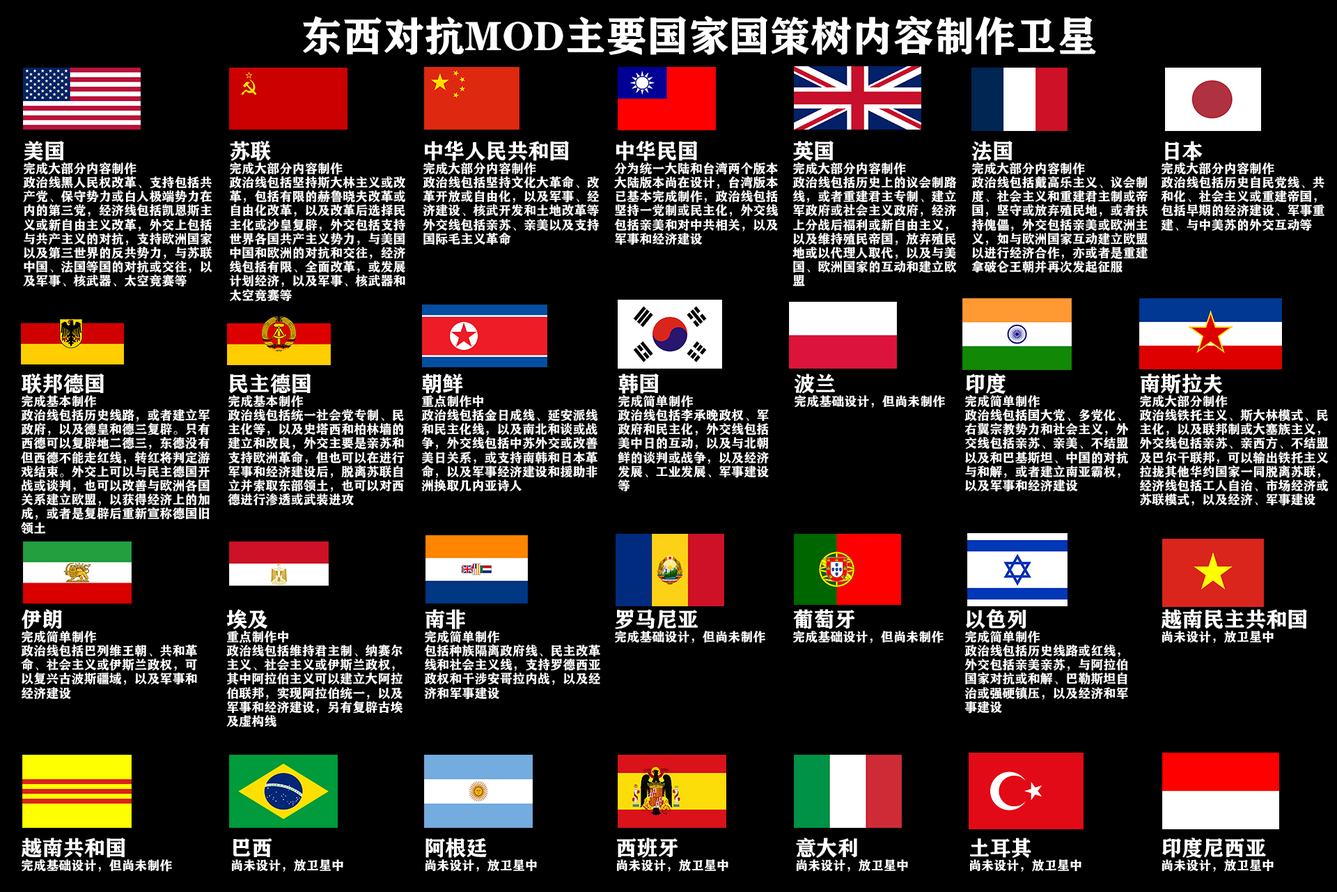
<style>
.page{position:relative;width:1337px;height:892px;background:#000000}
.page>*{position:absolute;margin:0}
.t1{font:40.7px "FZCHSJW--GB1-0";color:#ffffff}
.t2{font:12.5px/14.1px "FZCHSJW--GB1-0";color:#ffffff}
.t3{font:20.9px/21.7px "FZCHSJW--GB1-0";color:#ffffff}
.t4{font:12.5px/21.7px "FZCHSJW--GB1-0";color:#ffffff}
</style>
<div class="page">
<p class="t1" style="left:303px;top:15px;width:793px;height:40px">东西对抗MOD主要国家国策树内容制作卫星</p>
<p class="t2" style="left:23px;top:141px;width:189px;height:146px"><span class="t3">美国<br></span>完成大部分内容制作<br>政治线黑人民权改革、支持包括共<br>产党、保守势力或白人极端势力在<br>内的第三党，经济线包括凯恩斯主<br>义或新自由主义改革，外交上包括<br>与共产主义的对抗，支持欧洲国家<br>以及第三世界的反共势力，与苏联<br>中国、法国等国的对抗或交往，以<br>及军事、核武器、太空竞赛等</p>
<p class="t2" style="left:229px;top:141px;width:176px;height:161px"><span class="t3">苏联<br></span>完成大部分内容制作<br>政治线包括坚持斯大林主义或改<br>革，包括有限的赫鲁晓夫改革或<br>自由化改革，以及改革后选择民<br>主化或沙皇复辟，外交包括支持<br>世界各国共产主义势力，与美国<br>中国和欧洲的对抗和交往，经济<br>线包括有限、全面改革，或发展<br>计划经济，以及军事、核武器和<br>太空竞赛等</p>
<p class="t2" style="left:423px;top:141px;width:176px;height:104px"><span class="t3">中华人民共和国<br></span>完成大部分内容制作<br>政治线包括坚持文化大革命、改<br>革开放或自由化，以及军事、经<br>济建设、核武开发和土地改革等<br>外交线包括亲苏、亲美以及支持<br>国际毛主义革命</p>
<p class="t2" style="left:614px;top:141px;width:165px;height:104px"><span class="t3">中华民国<br></span>分为统一大陆和台湾两个版本<br>大陆版本尚在设计，台湾版本<br>已基本完成制作，政治线包括<br>坚持一党制或民主化，外交线<br>包括亲美和对中共相关，以及<br>军事和经济建设</p>
<p class="t2" style="left:793px;top:141px;width:164px;height:145px"><span class="t3">英国<br></span>完成大部分内容制作<br>政治线包括历史上的议会制路<br>线，或者重建君主专制、建立<br>军政府或社会主义政府，经济<br>上分战后福利或新自由主义，<br>以及维持殖民帝国，放弃殖民<br>地或以代理人取代，以及与美<br>国、欧洲国家的互动和建立欧<br>盟</p>
<p class="t2" style="left:972px;top:141px;width:177px;height:132px"><span class="t3">法国<br></span>完成大部分内容制作<br>政治线包括戴高乐主义、议会制<br>度、社会主义和重建君主制或帝<br>国，坚守或放弃殖民地，或者扶<br>持傀儡，外交包括亲美或欧洲主<br>义，如与欧洲国家互动建立欧盟<br>以进行经济合作，亦或者是重建<br>拿破仑王朝并再次发起征服</p>
<p class="t2" style="left:1161px;top:141px;width:164px;height:90px"><span class="t3">日本<br></span>完成大部分内容制作<br>政治线包括历史自民党线、共<br>和化、社会主义或重建帝国，<br>包括早期的经济建设、军事重<br>建、与中美苏的外交互动等</p>
<p class="t2" style="left:21px;top:373px;width:189px;height:161px"><span class="t3">联邦德国<br></span>完成基本制作<br>政治线包括历史线路，或者建立军<br>政府，以及德皇和德三复辟。只有<br>西德可以复辟地二德三，东德没有<br>但西德不能走红线，转红将判定游<br>戏结束。外交上可以与民主德国开<br>战或谈判，也可以改善与欧洲各国<br>关系建立欧盟，以获得经济上的加<br>成，或者是复辟后重新宣称德国旧<br>领土</p>
<p class="t2" style="left:228px;top:373px;width:177px;height:133px"><span class="t3">民主德国<br></span>完成基本制作<br>政治线包括统一社会党专制、民<br>主化等，以及史塔西和柏林墙的<br>建立和改良，外交主要是亲苏和<br>支持欧洲革命，但也可以在进行<br>军事和经济建设后，脱离苏联自<br>立并索取东部领土，也可以对西<br>德进行渗透或武装进攻</p>
<p class="t2" style="left:421px;top:373px;width:177px;height:119px"><span class="t3">朝鲜<br></span>重点制作中<br>政治线包括金日成线、延安派线<br>和民主化线，以及南北和谈或战<br>争，外交线包括中苏外交或改善<br>美日关系，或支持南韩和日本革<br>命，以及军事经济建设和援助非<br>洲换取几内亚诗人</p>
<p class="t2" style="left:618px;top:373px;width:151px;height:119px"><span class="t3">韩国<br></span>完成简单制作<br>政治线包括李承晚政权、军<br>政府和民主化，外交线包括<br>美中日的互动，以及与北朝<br>鲜的谈判或战争，以及经济<br>发展、工业发展、军事建设<br>等</p>
<p class="t4" style="left:795px;top:373px;width:150px;height:34px"><span class="t3">波兰<br></span>完成基础设计，但尚未制作</p>
<p class="t2" style="left:965px;top:373px;width:163px;height:119px"><span class="t3">印度<br></span>完成简单制作<br>政治线包括国大党、多党化、<br>右翼宗教势力和社会主义，外<br>交线包括亲苏、亲美、不结盟<br>以及和巴基斯坦、中国的对抗<br>与和解，或者建立南亚霸权，<br>以及军事和经济建设</p>
<p class="t2" style="left:1140px;top:373px;width:189px;height:133px"><span class="t3">南斯拉夫<br></span>完成大部分制作<br>政治线铁托主义、斯大林模式、民<br>主化，以及联邦制或大塞族主义，<br>外交线包括亲苏、亲西方、不结盟<br>及巴尔干联邦，可以输出铁托主义<br>拉拢其他华约国家一同脱离苏联，<br>经济线包括工人自治、市场经济或<br>苏联模式，以及经济、军事建设</p>
<p class="t2" style="left:21px;top:609px;width:176px;height:90px"><span class="t3">伊朗<br></span>完成简单制作<br>政治线包括巴列维王朝、共和革<br>命、社会主义或伊斯兰政权，可<br>以复兴古波斯疆域，以及军事和<br>经济建设</p>
<p class="t2" style="left:226px;top:609px;width:177px;height:118px"><span class="t3">埃及<br></span>重点制作中<br>政治线包括维持君主制、纳赛尔<br>主义、社会主义或伊斯兰政权，<br>其中阿拉伯主义可以建立大阿拉<br>伯联邦，实现阿拉伯统一，以及<br>军事和经济建设，另有复辟古埃<br>及虚构线</p>
<p class="t2" style="left:424px;top:609px;width:177px;height:90px"><span class="t3">南非<br></span>完成简单制作<br>包括种族隔离政府线、民主改革<br>线和社会主义线，支持罗德西亚<br>政权和干涉安哥拉内战，以及经<br>济和军事建设</p>
<p class="t4" style="left:615px;top:609px;width:151px;height:34px"><span class="t3">罗马尼亚<br></span>完成基础设计，但尚未制作</p>
<p class="t4" style="left:793px;top:609px;width:151px;height:34px"><span class="t3">葡萄牙<br></span>完成基础设计，但尚未制作</p>
<p class="t2" style="left:965px;top:608px;width:163px;height:105px"><span class="t3">以色列<br></span>完成简单制作<br>政治线包括历史线路或红线，<br>外交包括亲美亲苏，与阿拉伯<br>国家对抗或和解、巴勒斯坦自<br>治或强硬镇压，以及经济和军<br>事建设</p>
<p class="t4" style="left:1162px;top:609px;width:145px;height:34px"><span class="t3">越南民主共和国<br></span>尚未设计，放卫星中</p>
<p class="t4" style="left:22px;top:837px;width:150px;height:34px"><span class="t3">越南共和国<br></span>完成基础设计，但尚未制作</p>
<p class="t4" style="left:232px;top:838px;width:111px;height:33px"><span class="t3">巴西<br></span>尚未设计，放卫星中</p>
<p class="t4" style="left:426px;top:837px;width:111px;height:34px"><span class="t3">阿根廷<br></span>尚未设计，放卫星中</p>
<p class="t4" style="left:616px;top:837px;width:113px;height:34px"><span class="t3">西班牙<br></span>尚未设计，放卫星中</p>
<p class="t4" style="left:796px;top:837px;width:112px;height:34px"><span class="t3">意大利<br></span>尚未设计，放卫星中</p>
<p class="t4" style="left:970px;top:837px;width:112px;height:34px"><span class="t3">土耳其<br></span>尚未设计，放卫星中</p>
<p class="t4" style="left:1163px;top:837px;width:111px;height:34px"><span class="t3">印度尼西亚<br></span>尚未设计，放卫星中</p>
</div>
